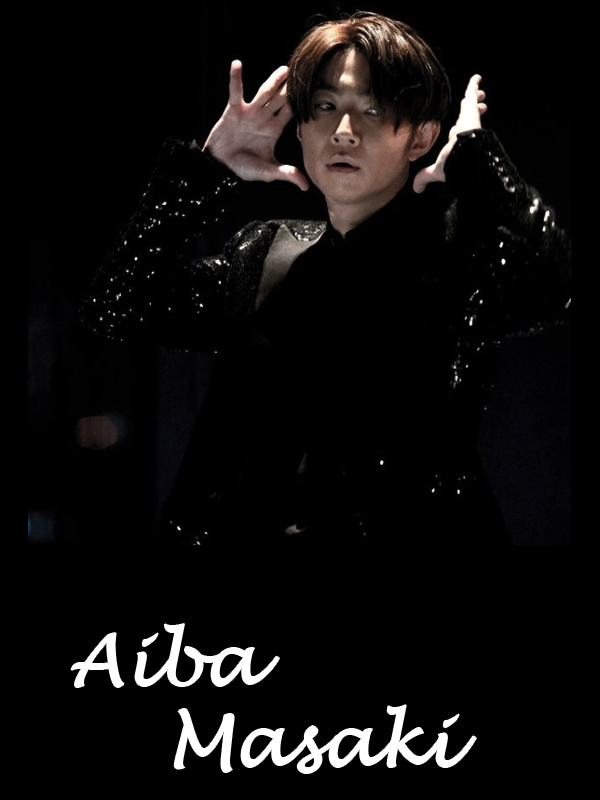
<style>
.page{position:relative;width:600px;height:800px;background:#000000}
.page>*{position:absolute;margin:0}
.t1{font:72px "LucidaHandwriting-Italic";color:#ffffff}
</style>
<div class="page">
<p class="t1" style="left:71px;top:624px;width:208px;height:63px">Aiba</p>
<p class="t1" style="left:174px;top:705px;width:302px;height:68px">Masaki</p>
</div>
